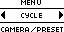
<style>
.page{position:relative;width:64px;height:32px;background:#ffffff}
.page>*{position:absolute;margin:0}
.t1{font:8px "04b03";color:#000000;scale:1.06 1}
.t2{font:8px "04b03";color:#000000}
</style>
<div class="page">
<p class="t1" style="left:21px;top:0px;width:20px;height:5px">MENU</p>
<p class="t1" style="left:21px;top:13px;width:21px;height:5px">CYCLE</p>
<p class="t2" style="left:1px;top:27px;width:29px;height:5px">CAMERA</p>
<p class="t2" style="left:31px;top:27px;width:6px;height:5px">/</p>
<p class="t2" style="left:37px;top:27px;width:27px;height:5px">PRESET</p>
</div>
